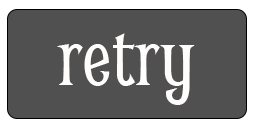
<style>
.page{position:relative;width:256px;height:128px;background:#505050}
.page>*{position:absolute;margin:0}
.t1{font:86px "Smythe";color:#fffcfc}
</style>
<div class="page">
<p class="t1" style="left:57px;top:33px;width:138px;height:72px">retry</p>
</div>
